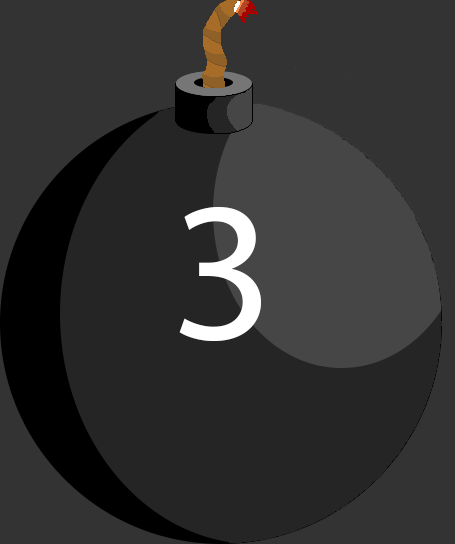
<style>
.page{position:relative;width:455px;height:544px;background:#333333}
.page>*{position:absolute;margin:0}
.t1{font:200px "MyriadPro-Regular";color:#ffffff}
</style>
<div class="page">
<p class="t1" style="left:179px;top:206px;width:82px;height:135px">3</p>
</div>
